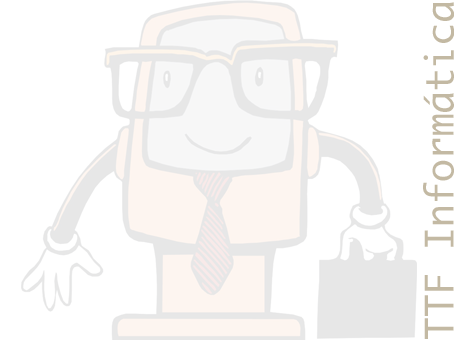
<style>
.page{position:relative;width:454px;height:340px;background:#ffffff}
.page>*{position:absolute;margin:0}
.t1{font:37.8px "Ayuthaya";color:#c3b9a3}
</style>
<div class="page">
<p class="t1" style="left:423px;top:2px;width:32px;height:337px;rotate:-90deg">TTF Informática</p>
</div>
